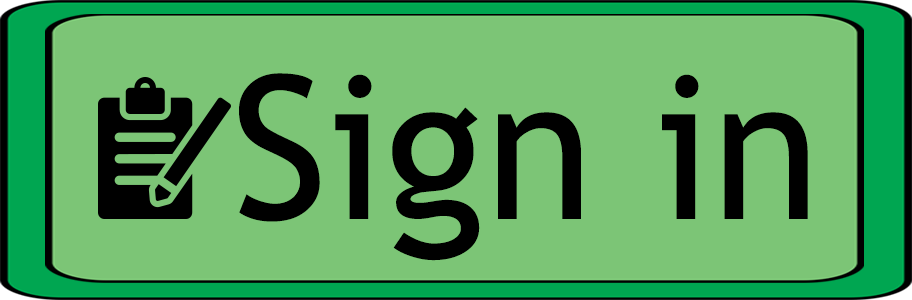
<style>
.page{position:relative;width:912px;height:300px;background:#7cc576}
.page>*{position:absolute;margin:0}
.t1{font:200px "TrebuchetMS";color:#000000}
</style>
<div class="page">
<p class="t1" style="left:239px;top:73px;width:569px;height:188px">Sign in</p>
</div>
